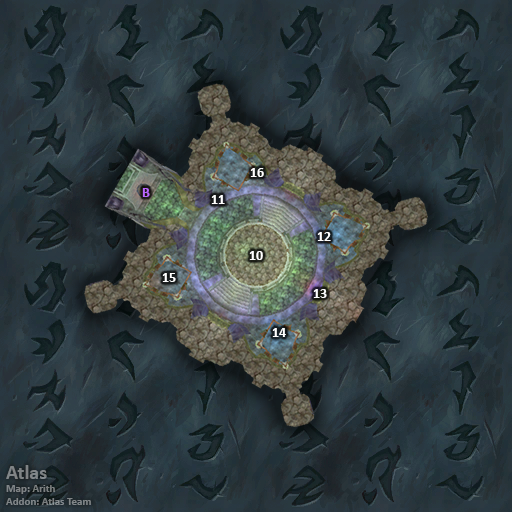
<style>
.page{position:relative;width:512px;height:512px}
.page>*{position:absolute;margin:0}
.t1{font:14px "Calibri-Bold";color:#ffffff}
.t2{font:14px "Calibri-Bold";color:#bb66ff}
.t3{font:11px "Calibri-Bold";color:#808486}
.t4{font:20px "Calibri-Bold";color:#808486}
</style>
<div class="page">
<p class="t1" style="left:250px;top:168px;width:14px;height:9px">16</p>
<p class="t2" style="left:142px;top:188px;width:8px;height:9px">B</p>
<p class="t1" style="left:211px;top:195px;width:14px;height:9px">11</p>
<p class="t1" style="left:317px;top:232px;width:14px;height:9px">12</p>
<p class="t1" style="left:249px;top:251px;width:14px;height:9px">10</p>
<p class="t1" style="left:162px;top:273px;width:14px;height:9px">15</p>
<p class="t1" style="left:313px;top:289px;width:14px;height:9px">13</p>
<p class="t1" style="left:272px;top:328px;width:14px;height:9px">14</p>
<p class="t3" style="left:6px;top:465px;width:85px;height:40px"><span class="t4">Atlas<br></span>Map: Arith<br>Addon: Atlas Team</p>
</div>
